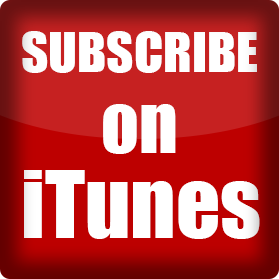
<style>
.page{position:relative;width:279px;height:279px;background:#ffffff}
.page>*{position:absolute;margin:0}
.t1{font:49.8px "Impact";color:#ffffff;scale:1.06 1}
.t2{font:74.2px "Impact";color:#ffffff}
.t3{font:86.5px "Impact";color:#ffffff}
</style>
<div class="page">
<p class="t1" style="left:22px;top:31px;width:235px;height:42px">SUBSCRIBE</p>
<p class="t2" style="left:103px;top:104px;width:73px;height:50px">on</p>
<p class="t3" style="left:24px;top:170px;width:236px;height:69px">iTunes</p>
</div>
